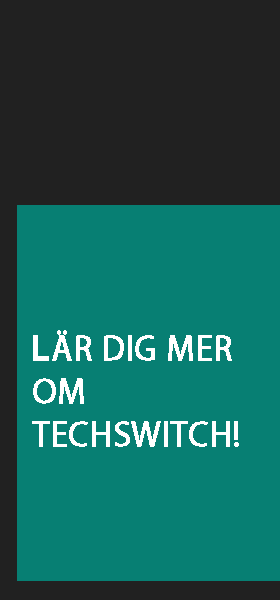
<style>
.page{position:relative;width:280px;height:600px;background:#077f73}
.page>*{position:absolute;margin:0}
.t1{font:36px "MyriadPro-Regular";color:#ffffff;font-weight:bold;scale:0.96 1}
.t2{font:36px "FSPDEMO-CodeProRegular";color:#ffffff;font-weight:bold;scale:0.96 1}
</style>
<div class="page">
<p class="t1" style="left:32px;top:330px;width:207px;height:117px"><span class="t2">L</span>ÄR DIG MER<br>OM<br>TECHSWITCH!</p>
</div>
